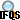
<style>
.page{position:relative;width:20px;height:20px;background:#fcfaf9}
.page>*{position:absolute;margin:0}
.t1{font:11px "BellGothicStd-Bold";letter-spacing:-0.1em;color:#000000;font-weight:bold;scale:0.9 1}
</style>
<div class="page">
<p class="t1" style="left:0px;top:11px;width:20px;height:9px">IFQS</p>
</div>
